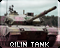
<style>
.page{position:relative;width:60px;height:48px}
.page>*{position:absolute;margin:0}
.t1{font:10px "CAMEO-RA2";letter-spacing:0.005em}
</style>
<div class="page">
<p class="t1" style="left:10px;top:42px;width:39px;height:5px">Qilin tank</p>
</div>
